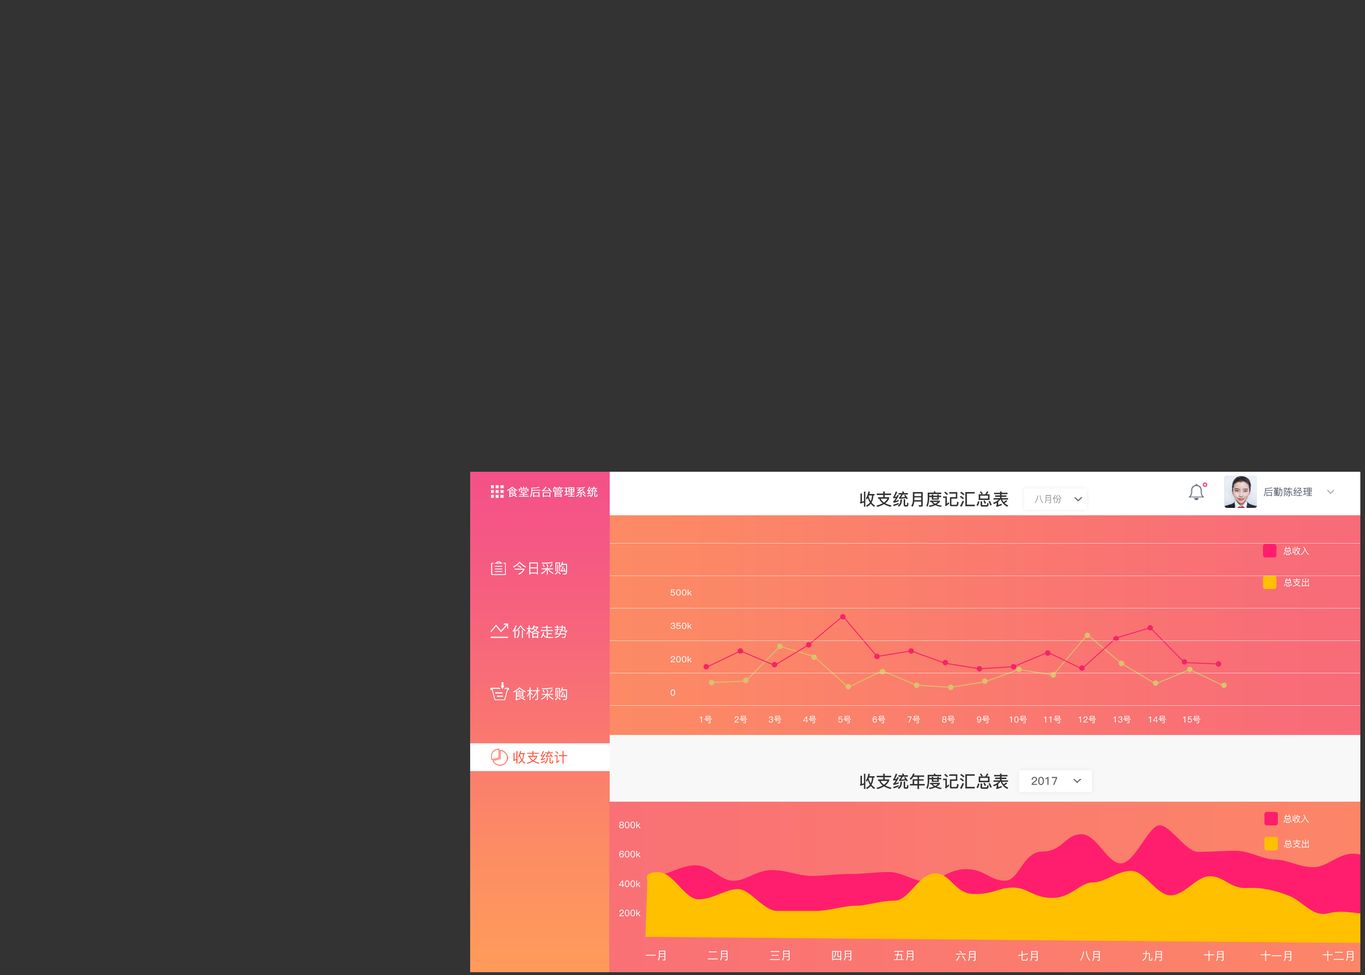
<style>
.page{position:relative;width:1365px;height:975px;background:#333333}
.page>*{position:absolute;margin:0}
.t1{font:11.1px "PingFang-SC-Regular";color:#ffffff;font-weight:bold}
.t2{font:16.7px "PingFang-SC-Bold";color:#333333}
.t3{font:9.6px "PingFang-SC-Light";color:#56606f;font-weight:bold}
.t4{font:9px "PingFang-SC-Medium";color:#ffffff}
.t5{font:13.9px "PingFang-SC-Medium";color:#ffffff}
.t6{font:8.3px/33.4px "PingFang-SC-Medium";letter-spacing:0.01em;color:#ffffff;scale:1.07 1}
.t7{font:8.3px "PingFang-SC-Medium";color:#ffffff}
.t8{font:13.9px "PingFang-SC-Medium";color:#ff4d30}
.t9{font:9px "PingFang-SC-Medium";letter-spacing:0.01em;color:#fefefe}
.t10{font:11.1px "PingFang-SC-Medium";color:#ffffff}
</style>
<div class="page">
<p class="t1" style="left:507px;top:487px;width:91px;height:10px">食堂后台管理系统</p>
<p class="t2" style="left:860px;top:491px;width:148px;height:16px">收支统月度记汇总表</p>
<p class="t3" style="left:1263px;top:487px;width:49px;height:10px">后勤陈经理</p>
<p class="t4" style="left:1283px;top:547px;width:26px;height:8px">总收入</p>
<p class="t5" style="left:513px;top:562px;width:54px;height:13px">今日采购</p>
<p class="t4" style="left:1284px;top:578px;width:25px;height:9px">总支出</p>
<p class="t6" style="left:670px;top:589px;width:22px;height:107px">500k<br>350k<br>200k<br>0</p>
<p class="t5" style="left:512px;top:625px;width:55px;height:13px">价格走势</p>
<p class="t5" style="left:513px;top:688px;width:54px;height:13px">食材采购</p>
<p class="t7" style="left:700px;top:716px;width:12px;height:8px">1号</p>
<p class="t7" style="left:734px;top:716px;width:13px;height:8px">2号</p>
<p class="t7" style="left:769px;top:716px;width:13px;height:8px">3号</p>
<p class="t7" style="left:803px;top:716px;width:13px;height:8px">4号</p>
<p class="t7" style="left:838px;top:716px;width:13px;height:8px">5号</p>
<p class="t7" style="left:873px;top:716px;width:13px;height:8px">6号</p>
<p class="t7" style="left:907px;top:716px;width:13px;height:8px">7号</p>
<p class="t7" style="left:942px;top:716px;width:13px;height:8px">8号</p>
<p class="t7" style="left:977px;top:716px;width:13px;height:8px">9号</p>
<p class="t7" style="left:1009px;top:716px;width:18px;height:8px">10号</p>
<p class="t7" style="left:1044px;top:716px;width:17px;height:8px">11号</p>
<p class="t7" style="left:1078px;top:716px;width:18px;height:8px">12号</p>
<p class="t7" style="left:1113px;top:716px;width:18px;height:8px">13号</p>
<p class="t7" style="left:1148px;top:716px;width:18px;height:8px">14号</p>
<p class="t7" style="left:1183px;top:716px;width:17px;height:8px">15号</p>
<p class="t8" style="left:513px;top:751px;width:54px;height:13px">收支统计</p>
<p class="t2" style="left:860px;top:774px;width:148px;height:16px">收支统年度记汇总表</p>
<p class="t9" style="left:619px;top:822px;width:22px;height:7px">800k</p>
<p class="t4" style="left:1283px;top:815px;width:26px;height:8px">总收入</p>
<p class="t4" style="left:1284px;top:840px;width:25px;height:8px">总支出</p>
<p class="t9" style="left:619px;top:851px;width:22px;height:7px">600k</p>
<p class="t9" style="left:619px;top:880px;width:22px;height:8px">400k</p>
<p class="t9" style="left:619px;top:910px;width:22px;height:7px">200k</p>
<p class="t10" style="left:645px;top:951px;width:20px;height:10px">一月</p>
<p class="t10" style="left:708px;top:951px;width:19px;height:10px">二月</p>
<p class="t10" style="left:770px;top:951px;width:20px;height:10px">三月</p>
<p class="t10" style="left:832px;top:951px;width:19px;height:10px">四月</p>
<p class="t10" style="left:893px;top:951px;width:20px;height:10px">五月</p>
<p class="t10" style="left:956px;top:951px;width:19px;height:11px">六月</p>
<p class="t10" style="left:1018px;top:951px;width:20px;height:11px">七月</p>
<p class="t10" style="left:1080px;top:951px;width:20px;height:11px">八月</p>
<p class="t10" style="left:1142px;top:951px;width:20px;height:11px">九月</p>
<p class="t10" style="left:1204px;top:951px;width:20px;height:11px">十月</p>
<p class="t10" style="left:1260px;top:951px;width:31px;height:11px">十一月</p>
<p class="t10" style="left:1322px;top:951px;width:31px;height:11px">十二月</p>
</div>
